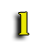
<style>
.page{position:relative;width:50px;height:50px;background:#ffffff}
.page>*{position:absolute;margin:0}
.t1{font:30px "StencilStd";color:#ece905}
</style>
<div class="page">
<p class="t1" style="left:18px;top:12px;width:11px;height:23px">1</p>
</div>
